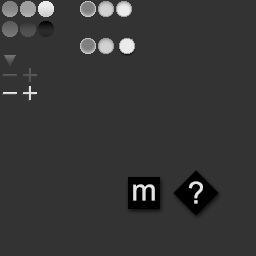
<style>
.page{position:relative;width:256px;height:256px;background:#333333}
.page>*{position:absolute;margin:0}
.t1{font:30px "DokChampa";color:#e4e4e4}
</style>
<div class="page">
<p class="t1" style="left:133px;top:184px;width:22px;height:17px">m</p>
<p class="t1" style="left:189px;top:181px;width:14px;height:23px">?</p>
</div>
